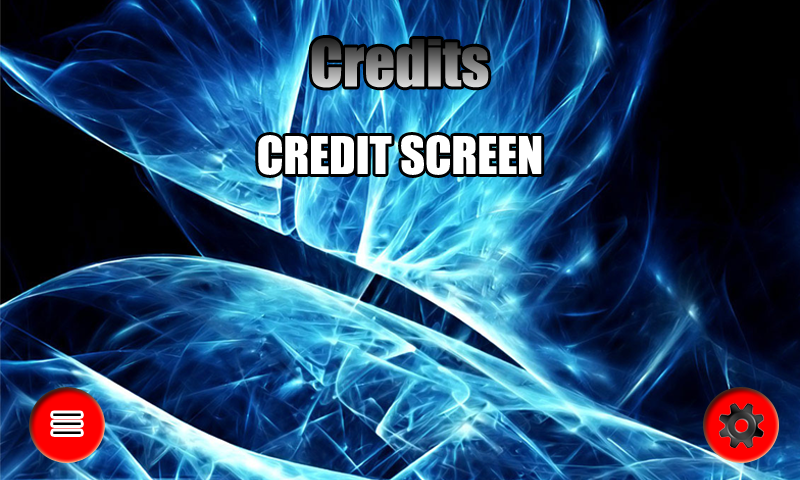
<style>
.page{position:relative;width:800px;height:480px}
.page>*{position:absolute;margin:0}
.t1{font:60px "Impact"}
.t2{font:48px "Impact";color:#ffffff;text-transform:uppercase}
.t3{font:48px/9px "Impact";letter-spacing:-0.08em;color:#010101;text-transform:uppercase}
</style>
<div class="page">
<p class="t1" style="left:311px;top:38px;width:178px;height:50px">Credits</p>
<p class="t2" style="left:258px;top:135px;width:284px;height:40px">CREDIT SCREEN</p>
<p class="t3" style="left:53px;top:413px;width:28px;height:21px;text-align:center">_<br>_<br>_</p>
</div>
